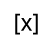
<style>
.page{position:relative;width:53px;height:41px;background:#ffffff}
.page>*{position:absolute;margin:0}
.t1{font:23.7px "DroidSans";color:#000000}
</style>
<div class="page">
<p class="t1" style="left:15px;top:13px;width:23px;height:22px">[x]</p>
</div>
